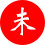
<style>
.page{position:relative;width:45px;height:45px;background:#ff0000}
.page>*{position:absolute;margin:0}
.t1{font:30px "GBWeiBei-Bold";color:#ffffff}
</style>
<div class="page">
<p class="t1" style="left:10px;top:7px;width:26px;height:29px">未</p>
</div>
